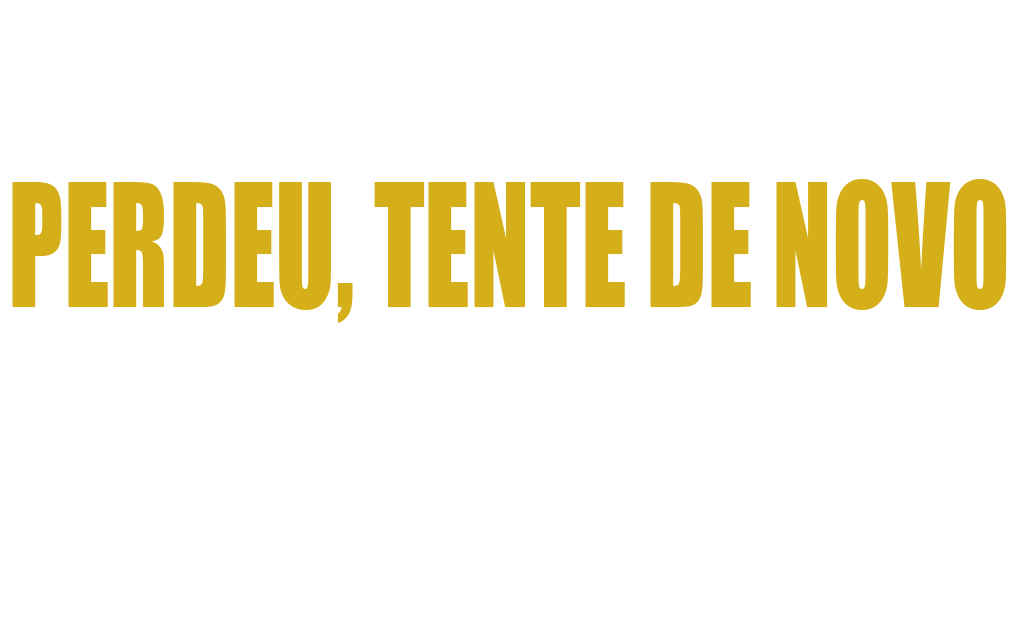
<style>
.page{position:relative;width:1025px;height:641px;background:#ffffff}
.page>*{position:absolute;margin:0}
.t1{font:271.4px "Impact";color:#d4af1a;font-variant:small-caps;scale:0.7 1}
.t2{font:203.5px "SegoeScript-Bold";color:#036c6f;font-variant:small-caps;scale:0.7 1}
</style>
<div class="page">
<p class="t1" style="left:12px;top:178px;width:995px;height:145px"><span class="t2">    </span>PERDEU, TENTE DE NOVO</p>
</div>
